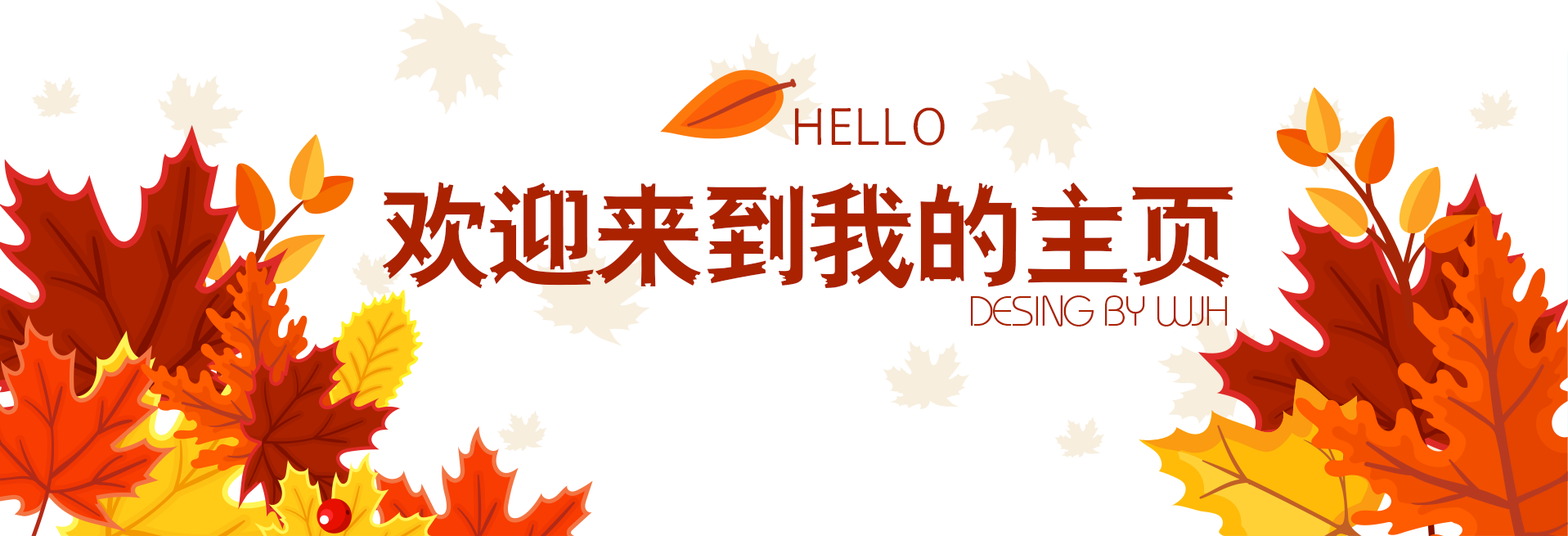
<style>
.page{position:relative;width:1568px;height:536px;background:#ffffff}
.page>*{position:absolute;margin:0}
.t1{font:57.4px "HYQuanTangShiJ";letter-spacing:0.05em;color:#ab2200}
.t2{font:112.5px "HYb5gj";letter-spacing:-0.05em;color:#ab2200}
.t3{font:41.9px "BauhausStd-Light";letter-spacing:-0.05em;color:#ab2200;text-transform:uppercase}
</style>
<div class="page">
<p class="t1" style="left:795px;top:107px;width:150px;height:39px">HELLO</p>
<p class="t2" style="left:382px;top:182px;width:851px;height:107px">欢迎来到我的主页</p>
<p class="t3" style="left:971px;top:294px;width:256px;height:32px">desing by wjh</p>
</div>
